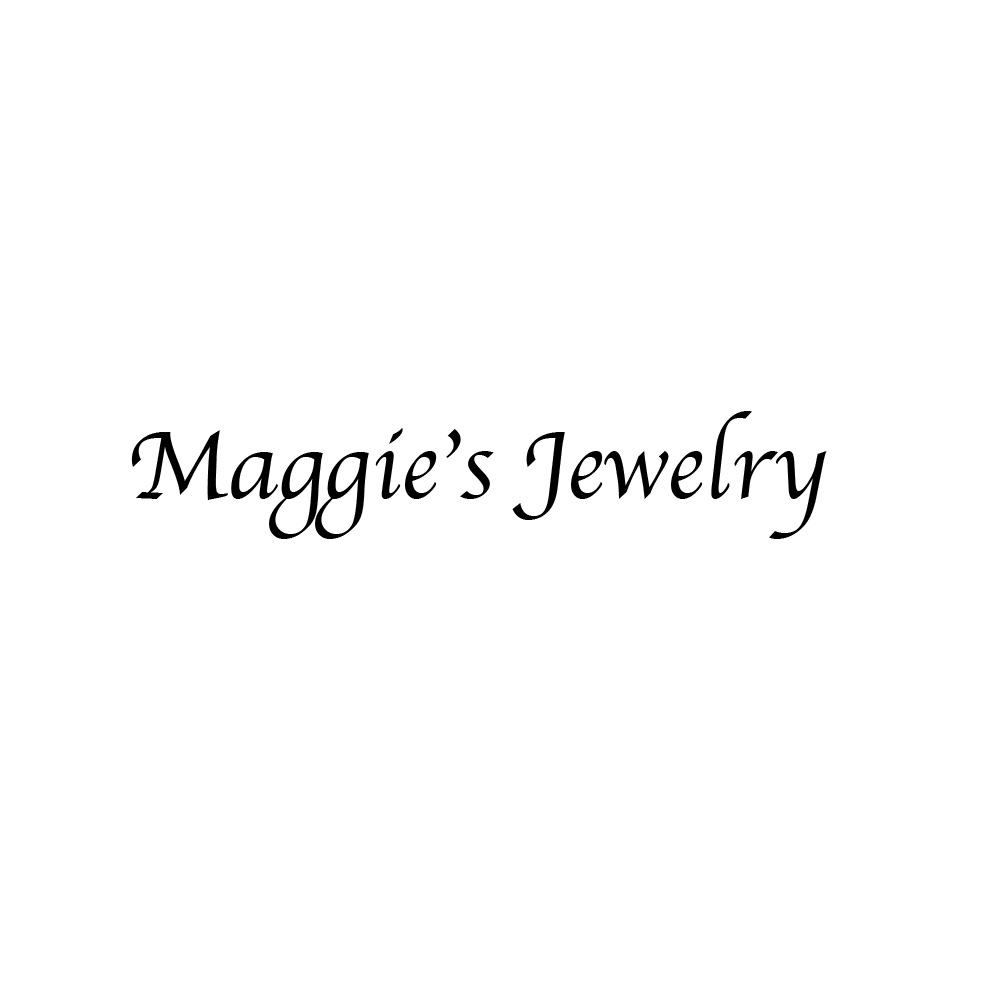
<style>
.page{position:relative;width:1000px;height:1000px;background:#ffffff}
.page>*{position:absolute;margin:0}
.t1{font:100px "Apple-Chancery";color:#000000}
</style>
<div class="page">
<p class="t1" style="left:131px;top:411px;width:696px;height:128px">Maggie’s Jewelry</p>
</div>
